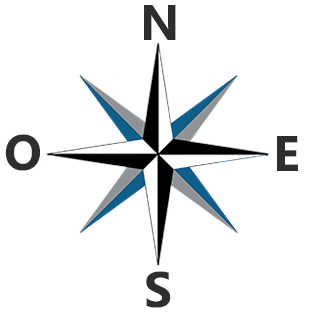
<style>
.page{position:relative;width:311px;height:313px;background:#ffffff}
.page>*{position:absolute;margin:0}
.t1{font:50px "MicrosoftPhagsPa-Bold";color:#2e2e2e}
</style>
<div class="page">
<p class="t1" style="left:144px;top:5px;width:32px;height:35px">N</p>
<p class="t1" style="left:5px;top:134px;width:35px;height:37px">O</p>
<p class="t1" style="left:277px;top:136px;width:21px;height:35px">E</p>
<p class="t1" style="left:146px;top:271px;width:25px;height:37px">S</p>
</div>
